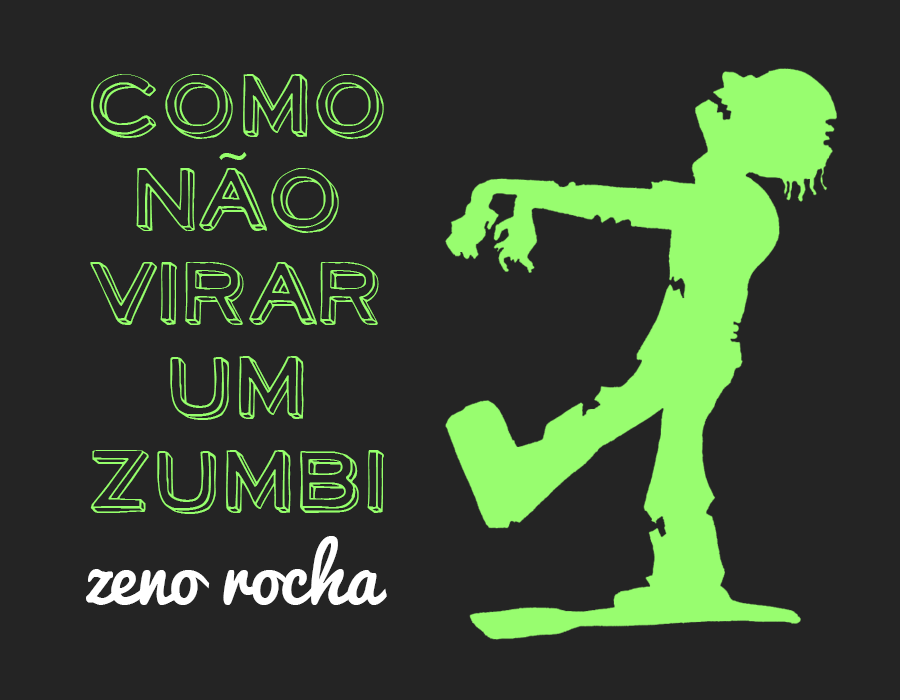
<style>
.page{position:relative;width:900px;height:700px;background:#242424}
.page>*{position:absolute;margin:0}
.t1{font:94.3px/94.1px "NeoRetroDraw";color:#96ff6c}
.t2{font:58px "Mshtakan";color:#96ff6c}
.t3{font:72.6px "Pacifico";color:#ffffff}
</style>
<div class="page">
<p class="t1" style="left:90px;top:74px;width:294px;height:440px;text-align:center">como<br>nao<br>virar<br>um<br>zumbi</p>
<p class="t2" style="left:219px;top:152px;width:28px;height:8px">~</p>
<p class="t3" style="left:86px;top:536px;width:301px;height:69px">zeno rocha</p>
</div>
